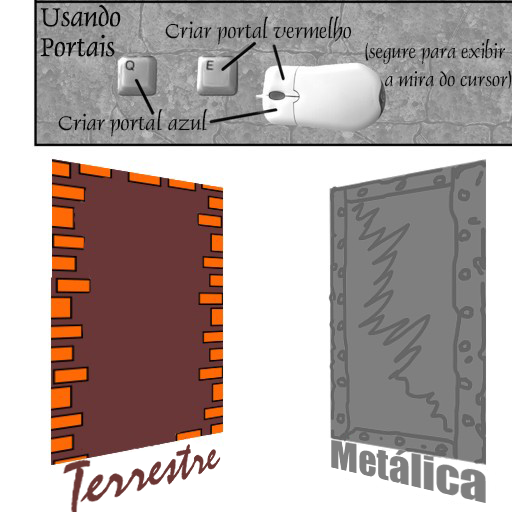
<style>
.page{position:relative;width:512px;height:512px;background:#ffffff}
.page>*{position:absolute;margin:0}
.t1{font:50.5px/30px "Dauphin-Normal";color:#080808}
.t2{font:39px "Dauphin-Normal";color:#080808}
.t3{font:35.3px/28px "Dauphin-Normal";color:#080808}
.t4{font:38.2px "Dauphin-Normal";color:#080808;scale:1.03 1}
.t5{font:38.2px "Dauphin-Normal";letter-spacing:0.04em;color:#080808;scale:1.03 1}
</style>
<div class="page">
<p class="t1" style="left:40px;top:4px;width:81px;height:53px">Usando<br>Portais</p>
<p class="t2" style="left:165px;top:16px;width:187px;height:29px">Criar portal vermelho</p>
<p class="t3" style="left:365px;top:38px;width:147px;height:51px">(segure para exibir <br>      a mira do cursor)</p>
<p class="t4" style="left:58px;top:109px;width:150px;height:28px">Criar port<span class="t5">a</span>l azul</p>
</div>
